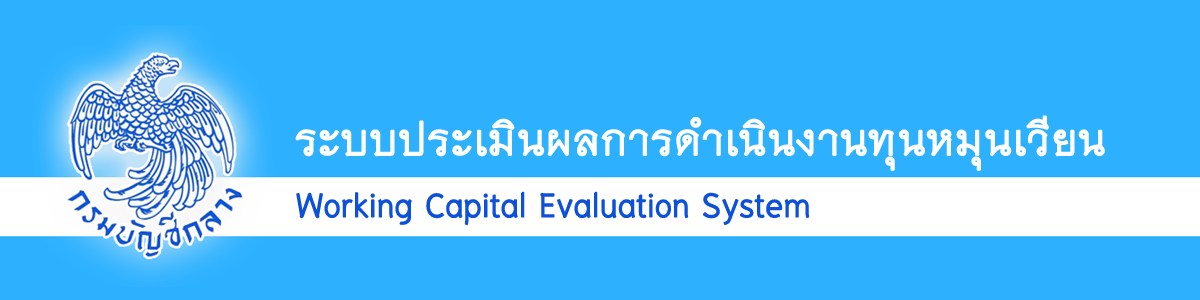
<style>
.page{position:relative;width:1200px;height:300px;background:#2db1ff}
.page>*{position:absolute;margin:0}
.t1{font:60.8px "THNiramitAS";color:#ffffff;font-weight:bold}
.t2{font:48px "THNiramitAS";color:#0c50db;font-weight:bold}
</style>
<div class="page">
<p class="t1" style="left:295px;top:115px;width:810px;height:56px">ระบบประเมินผลการดำเนินงานทุนหมุนเวียน</p>
<p class="t2" style="left:296px;top:191px;width:514px;height:35px">Working Capital Evaluation System</p>
</div>
